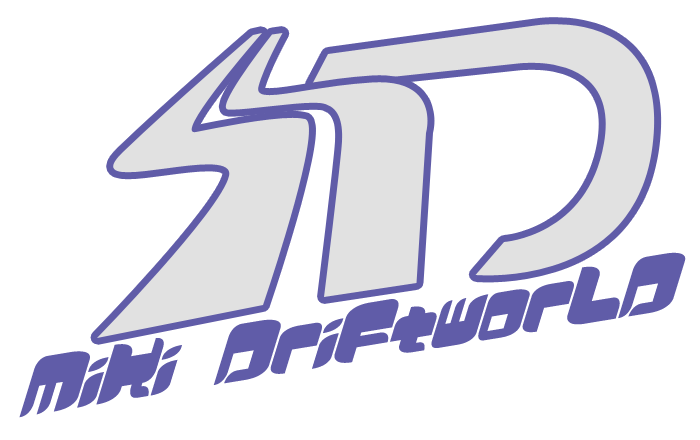
<style>
.page{position:relative;width:700px;height:440px;background:#ffffff}
.page>*{position:absolute;margin:0}
.t1{font:77.8px "Comicker";color:#605ca8;scale:0.89 1}
</style>
<div class="page">
<p class="t1" style="left:19px;top:252px;width:667px;height:166px;rotate:-9deg">MiKi DriFtworLD</p>
</div>
